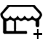
<style>
.page{position:relative;width:45px;height:45px;background:#ffffff}
.page>*{position:absolute;margin:0}
.t1{font:18px "ArialMT";color:#000000}
</style>
<div class="page">
<p class="t1" style="left:33px;top:29px;width:10px;height:10px">+</p>
</div>
